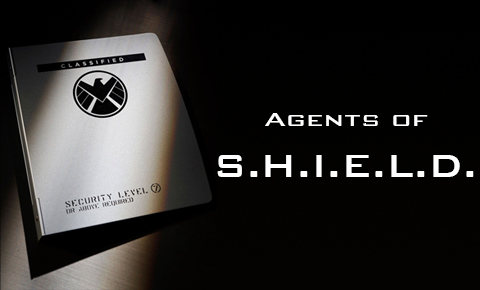
<style>
.page{position:relative;width:480px;height:290px}
.page>*{position:absolute;margin:0}
.t1{font:25px "BankGothic-Medium";color:#ffffff;scale:1.15 1}
.t2{font:41.7px "BankGothic-Medium";color:#ffffff}
</style>
<div class="page">
<p class="t1" style="left:265px;top:113px;width:163px;height:13px">Agents of</p>
<p class="t2" style="left:217px;top:155px;width:257px;height:22px">S.H.I.E.L.D.</p>
</div>
